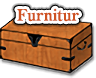
<style>
.page{position:relative;width:96px;height:78px;background:#ffffff}
.page>*{position:absolute;margin:0}
.t1{font:16px "RyuminPro-ExBold";letter-spacing:-0.04em;color:#cf5323}
</style>
<div class="page">
<p class="t1" style="left:17px;top:8px;width:63px;height:14px">Furnitur</p>
</div>
